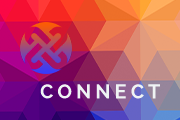
<style>
.page{position:relative;width:180px;height:120px}
.page>*{position:absolute;margin:0}
.t1{font:20px "Raleway-Bold";letter-spacing:0.2em;color:#eff4f4;text-transform:uppercase}
</style>
<div class="page">
<p class="t1" style="left:40px;top:84px;width:120px;height:15px">connect</p>
</div>
